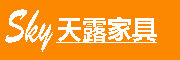
<style>
.page{position:relative;width:180px;height:60px;background:#fb8800}
.page>*{position:absolute;margin:0}
.t1{font:48.5px "BrushScriptStd";color:#ffffff;scale:0.6 1}
.t2{font:25px "MicrosoftYaHei-Bold";color:#ffffff;text-decoration:underline}
</style>
<div class="page">
<p class="t1" style="left:5px;top:9px;width:48px;height:43px">Sky</p>
<p class="t2" style="left:56px;top:17px;width:101px;height:26px">天露家具</p>
</div>
